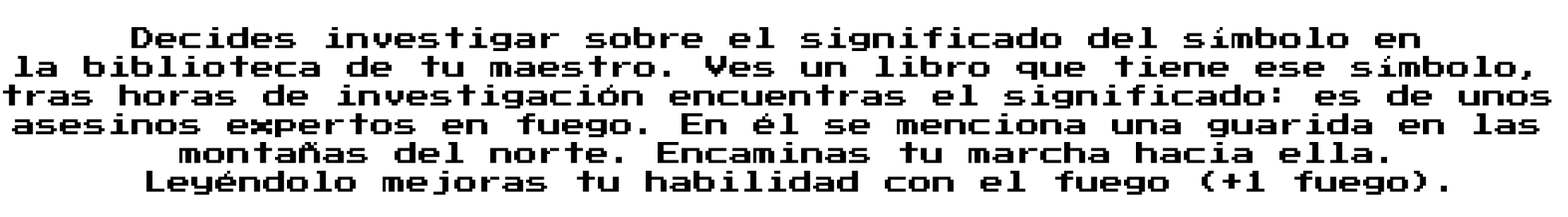
<style>
.page{position:relative;width:1568px;height:217px;background:#ffffff}
.page>*{position:absolute;margin:0}
.t1{font:23.9px "PressStart2P";color:#000000}
</style>
<div class="page">
<p class="t1" style="left:2px;top:27px;width:1550px;height:168px;text-align:center">Decides investigar sobre el significado del símbolo en <br>la biblioteca de tu maestro. Ves un libro que tiene ese símbolo, <br>tras horas de investigación encuentras el significado: es de unos <br>asesinos expertos en fuego. En él se menciona una guarida en las <br>montañas del norte. Encaminas tu marcha hacia ella.<br> Leyéndolo mejoras tu habilidad con el fuego (+1 fuego).</p>
</div>
